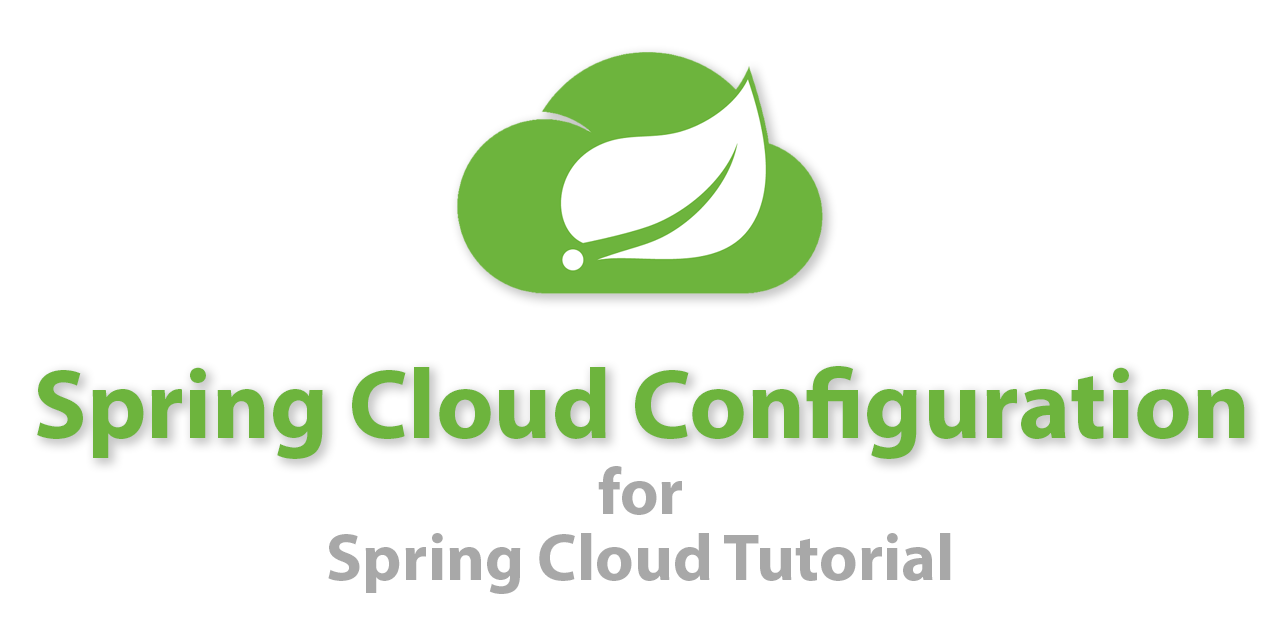
<style>
.page{position:relative;width:1280px;height:640px;background:#ffffff}
.page>*{position:absolute;margin:0}
.t1{font:100px "MyriadPro-Bold";color:#6db43d}
.t2{font:66.7px/66px "MyriadPro-Bold";color:#a8a8a8}
</style>
<div class="page">
<p class="t1" style="left:37px;top:366px;width:1208px;height:93px">Spring Cloud Configuration</p>
<p class="t2" style="left:328px;top:466px;width:623px;height:128px;text-align:center">for<br>Spring Cloud Tutorial</p>
</div>
